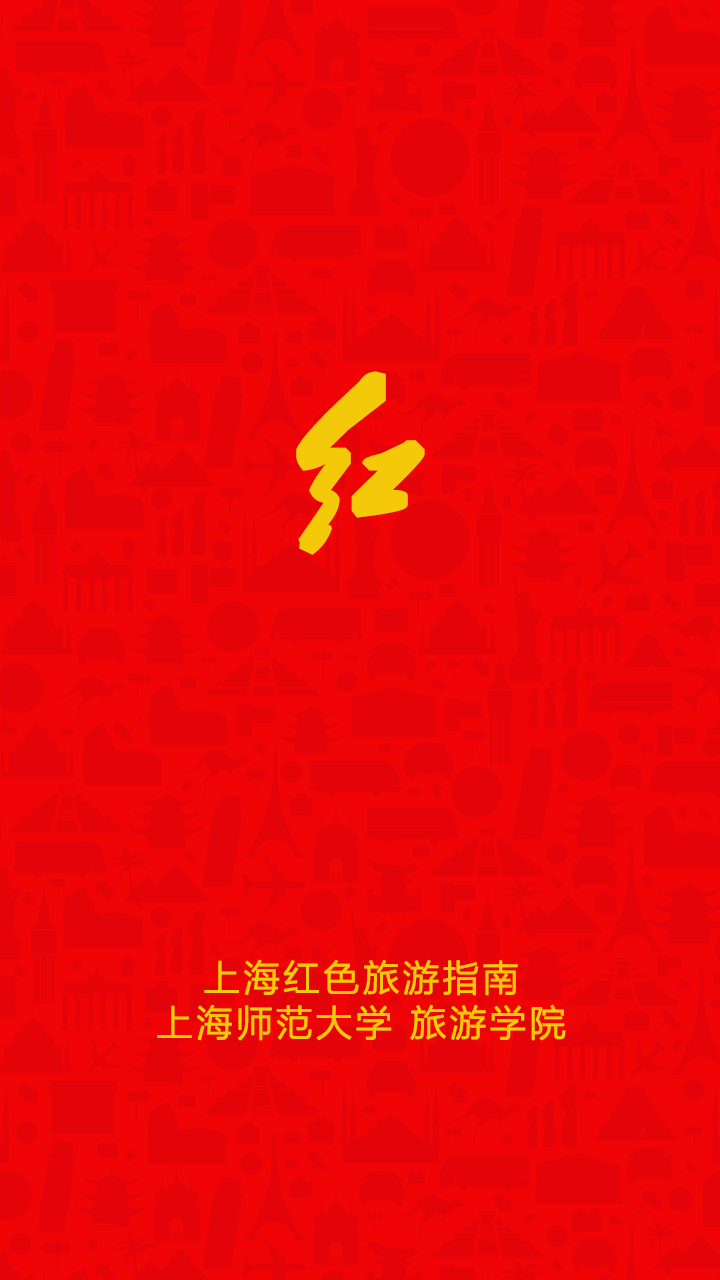
<style>
.page{position:relative;width:720px;height:1280px;background:#f00405}
.page>*{position:absolute;margin:0}
.t1{font:160px "²ÝÌ´Õ«Ã«Ôó¶«×ÖÌå";letter-spacing:0.08em;color:#f3c909;font-weight:bold}
.t2{font:36px/45px "MicrosoftYaHeiLight";letter-spacing:0.08em;color:#f3c909;font-weight:bold}
</style>
<div class="page">
<p class="t1" style="left:296px;top:371px;width:129px;height:184px">红</p>
<p class="t2" style="left:157px;top:959px;width:409px;height:82px;text-align:center">上海红色旅游指南<br>上海师范大学 旅游学院</p>
</div>
